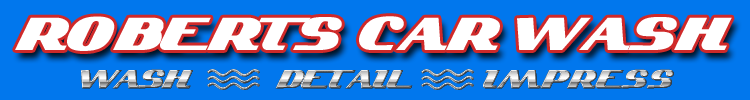
<style>
.page{position:relative;width:750px;height:100px;background:#0177ed}
.page>*{position:absolute;margin:0}
.t1{font:46px "KelvinizedNormal";color:#ffffff;scale:0.87 1}
.t2{font:25.4px "KelvinizedNormal";letter-spacing:-0.1em;scale:0.87 1}
.t3{font:25.4px "KelvinizedNormal";letter-spacing:-0.005em;scale:0.87 1}
</style>
<div class="page">
<p class="t1" style="left:15px;top:16px;width:717px;height:35px">ROBERTS CAR WASH</p>
<p class="t2" style="left:81px;top:69px;width:112px;height:20px">WASH</p>
<p class="t3" style="left:275px;top:70px;width:138px;height:19px">DETAIL</p>
<p class="t3" style="left:483px;top:69px;width:191px;height:20px">IMPRESS</p>
</div>
